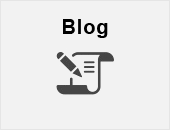
<style>
.page{position:relative;width:170px;height:130px;background:#f2f2f2}
.page>*{position:absolute;margin:0}
.t1{font:20px "Arial-BoldMT";letter-spacing:0.04em;color:#000000}
</style>
<div class="page">
<p class="t1" style="left:63px;top:19px;width:45px;height:19px">Blog</p>
</div>
